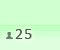
<style>
.page{position:relative;width:60px;height:50px;background:#d0ffd0}
.page>*{position:absolute;margin:0}
.t1{font:15.7px "Calibri";letter-spacing:0.08em;color:#545454}
</style>
<div class="page">
<p class="t1" style="left:15px;top:29px;width:17px;height:10px">25</p>
</div>
